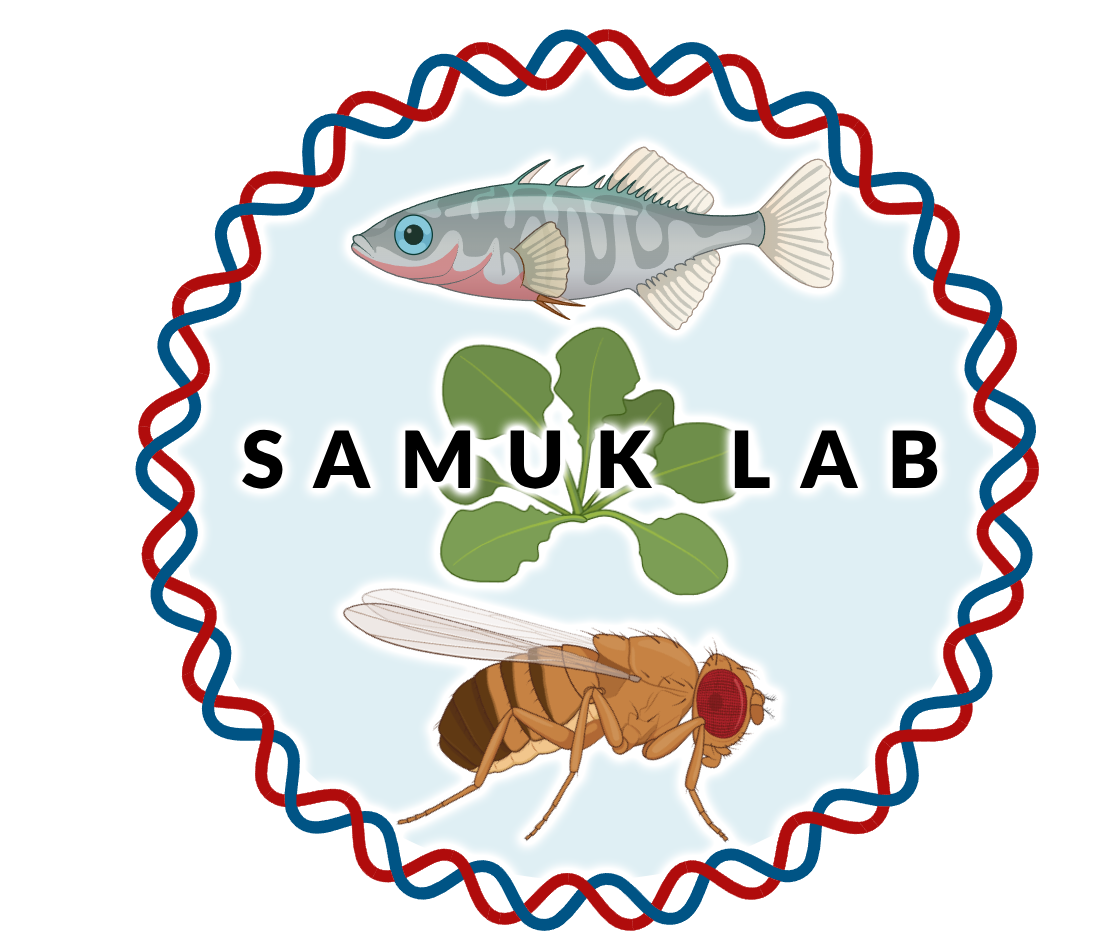
<style>
.page{position:relative;width:1110px;height:945px;background:#ffffff}
.page>*{position:absolute;margin:0}
.t1{font:79px "Lato-Black";letter-spacing:0.381em;color:#000000}
</style>
<div class="page">
<p class="t1" style="left:242px;top:429px;width:696px;height:60px">SAMUK LAB</p>
</div>
